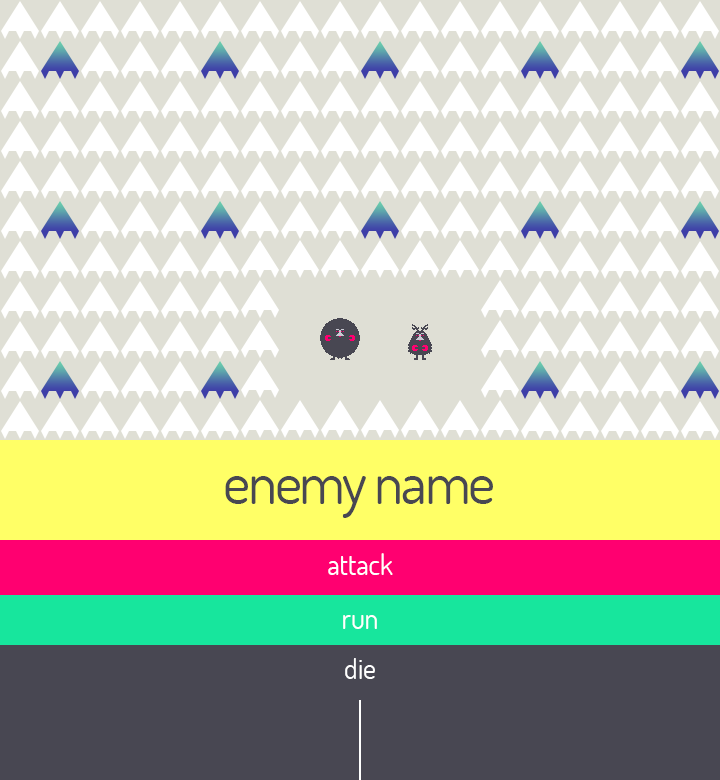
<style>
.page{position:relative;width:720px;height:780px;background:#dfdfd5}
.page>*{position:absolute;margin:0}
.t1{font:59px "Dosis-Regular";letter-spacing:-0.04em;color:#484752}
.t2{font:28px "Dosis-Regular";color:#ffffff}
</style>
<div class="page">
<p class="t1" style="left:225px;top:476px;width:268px;height:42px">enemy name</p>
<p class="t2" style="left:328px;top:553px;width:65px;height:22px">attack</p>
<p class="t2" style="left:343px;top:615px;width:34px;height:14px">run</p>
<p class="t2" style="left:345px;top:658px;width:30px;height:21px">die</p>
</div>
